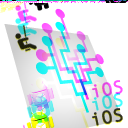
<style>
.page{position:relative;width:128px;height:128px;background:#ffffff}
.page>*{position:absolute;margin:0}
.t1{font:18px "AndaleMono";font-weight:bold}
</style>
<div class="page">
<p class="t1" style="left:92px;top:92px;width:31px;height:18px;rotate:-12deg">iOS</p>
</div>
